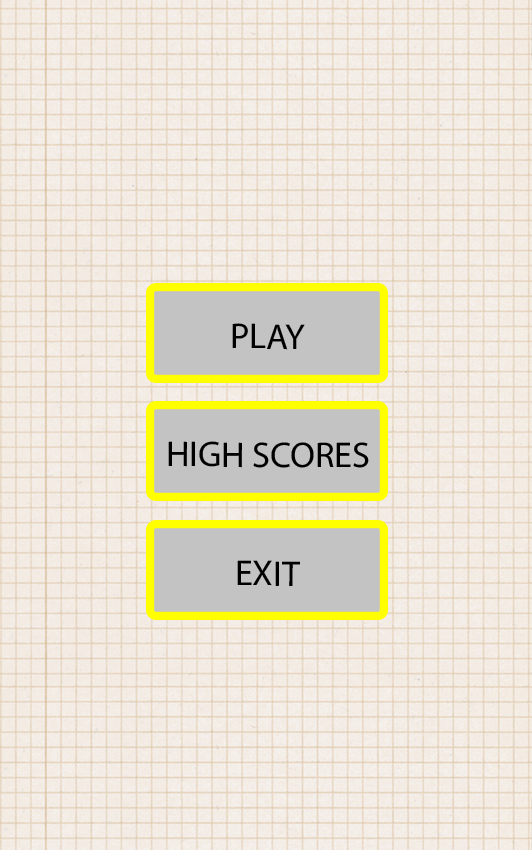
<style>
.page{position:relative;width:532px;height:850px}
.page>*{position:absolute;margin:0}
.t1{font:36px "MyriadHebrew-Regular";color:#000000}
</style>
<div class="page">
<p class="t1" style="left:232px;top:323px;width:73px;height:27px">PLAY</p>
<p class="t1" style="left:168px;top:441px;width:201px;height:27px">HIGH SCORES</p>
<p class="t1" style="left:237px;top:560px;width:63px;height:26px">EXIT</p>
</div>
